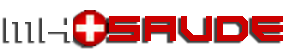
<style>
.page{position:relative;width:291px;height:56px;background:#ffffff}
.page>*{position:absolute;margin:0}
.t1{font:50.3px "Goteki-45";letter-spacing:0.025em;color:#cc0000}
.t2{font:50.3px "Goteki-45";letter-spacing:0.025em;color:#ffffff}
</style>
<div class="page">
<p class="t1" style="left:6px;top:16px;width:277px;height:25px"><span class="t2">MH  </span>SAUDE</p>
</div>
